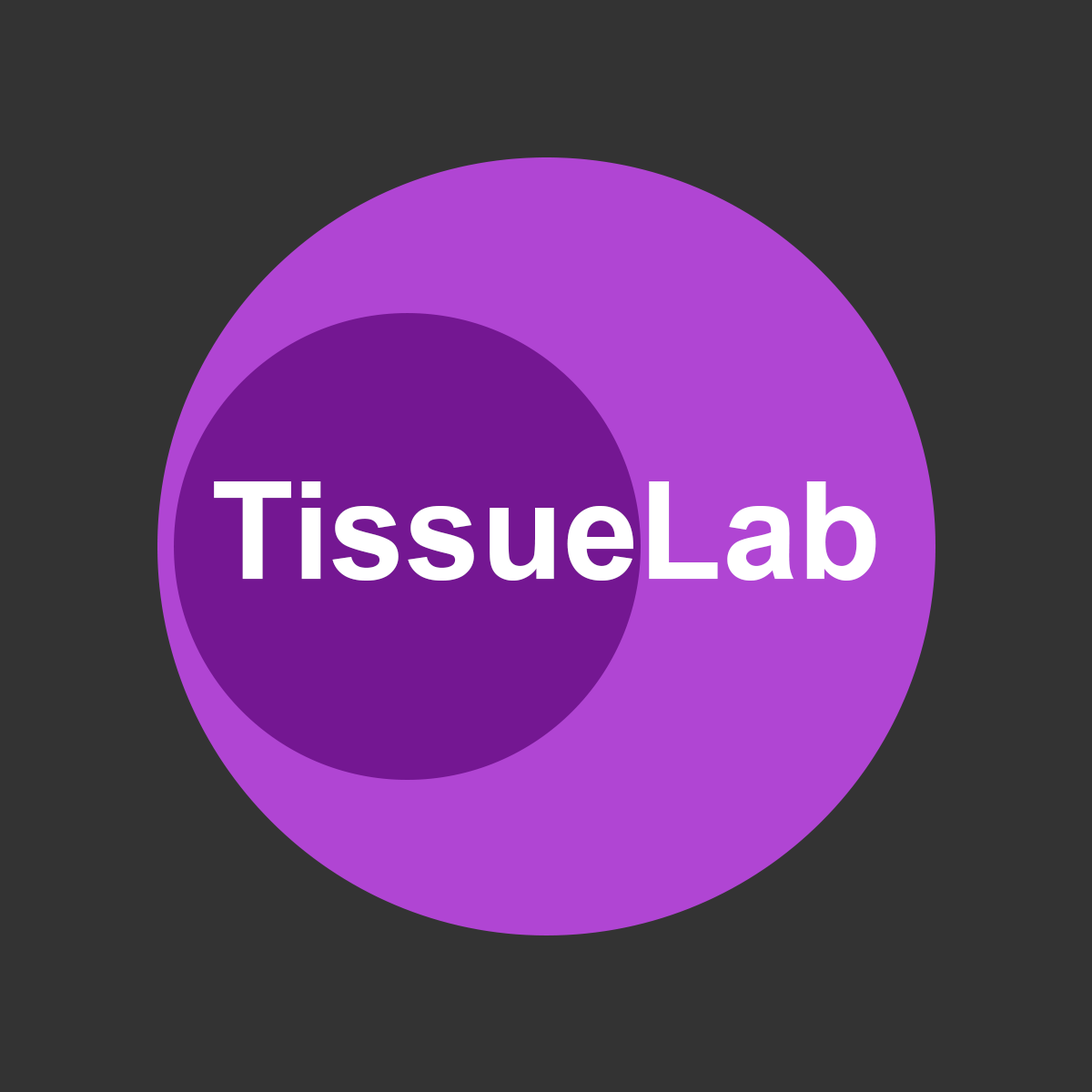
<style>
.page{position:relative;width:1092px;height:1092px;background:#333333}
.page>*{position:absolute;margin:0}
.t1{font:135.9px "Arial-BoldMT";color:#ffffff}
</style>
<div class="page">
<p class="t1" style="left:214px;top:481px;width:662px;height:100px">TissueLab</p>
</div>
